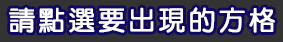
<style>
.page{position:relative;width:283px;height:42px;background:#333333}
.page>*{position:absolute;margin:0}
.t1{font:26.7px "DFYuan-Md-HKP-BF";letter-spacing:0.1em;color:#ffffff;font-weight:bold}
</style>
<div class="page">
<p class="t1" style="left:9px;top:7px;width:266px;height:26px">請點選要出現的方格</p>
</div>
